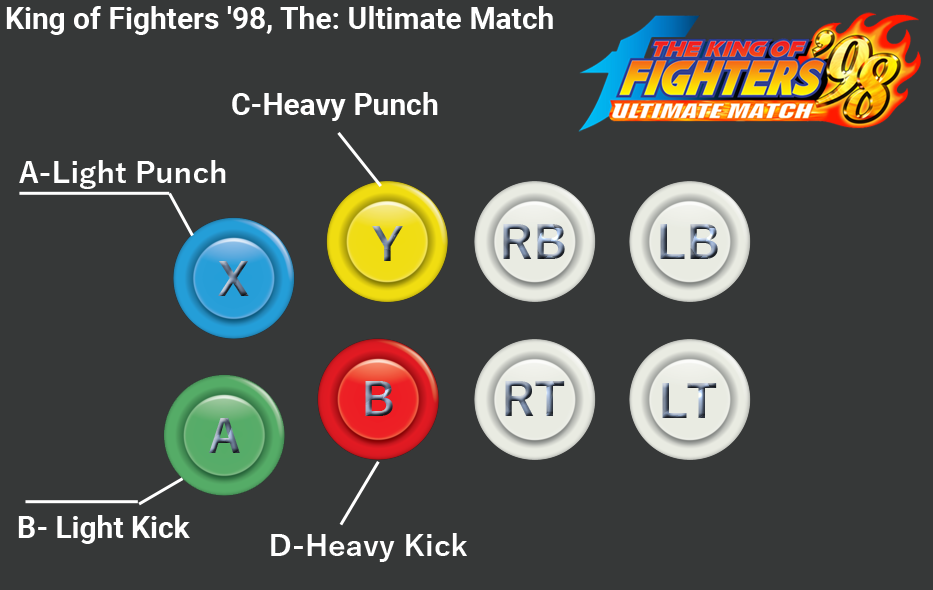
<style>
.page{position:relative;width:933px;height:590px;background:#363838}
.page>*{position:absolute;margin:0}
.t1{font:30px "Roboto-Bold";color:#ffffff}
.t2{font:30px "YuGothic-Bold";color:#ffffff}
</style>
<div class="page">
<p class="t1" style="left:6px;top:6px;width:547px;height:29px">King of Fighters '98, The: Ultimate Match</p>
<p class="t1" style="left:232px;top:92px;width:206px;height:29px">C-Heavy Punch</p>
<p class="t2" style="left:19px;top:160px;width:207px;height:29px">A-Light Punch</p>
<p class="t1" style="left:18px;top:515px;width:172px;height:29px">B- Light Kick</p>
<p class="t2" style="left:271px;top:533px;width:196px;height:29px">D-Heavy Kick</p>
</div>
